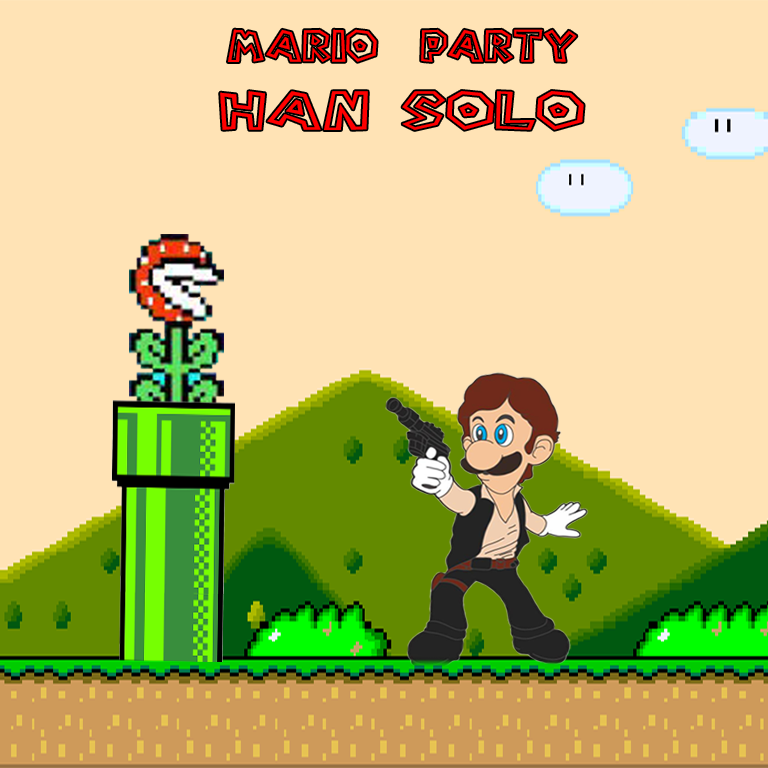
<style>
.page{position:relative;width:768px;height:768px;background:#ffe3b5}
.page>*{position:absolute;margin:0}
.t1{font:40.5px "Super-Mario-Bros.-Regular";color:#ff0000;scale:1.09 1}
.t2{font:48.9px "Super-Mario-Bros.-Regular";color:#ff0000;scale:1.37 1}
</style>
<div class="page">
<p class="t1" style="left:228px;top:29px;width:349px;height:33px">Mario  Party</p>
<p class="t2" style="left:220px;top:91px;width:364px;height:39px">Han Solo</p>
</div>
